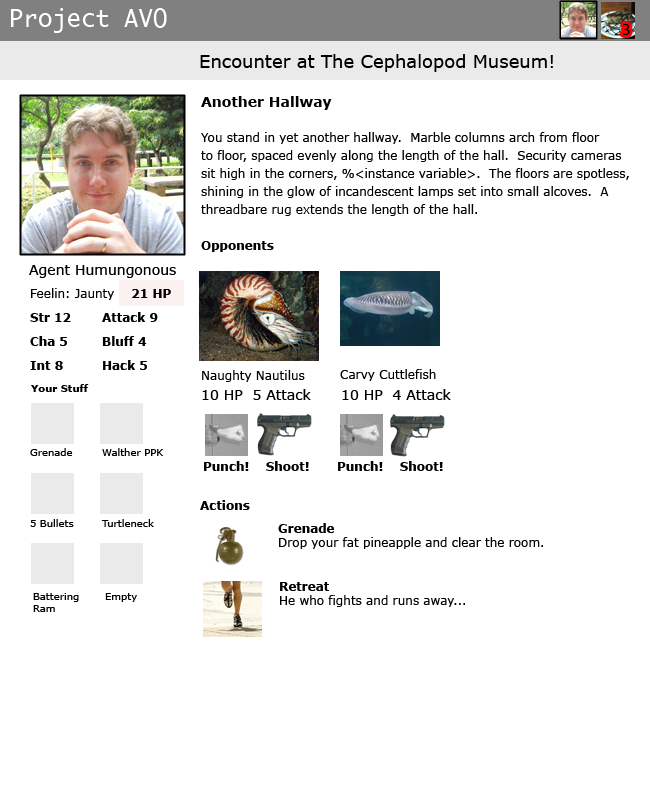
<style>
.page{position:relative;width:650px;height:800px;background:#ffffff}
.page>*{position:absolute;margin:0}
.t1{font:24px "Ayuthaya";color:#ffffff}
.t2{font:14px "Ayuthaya";color:#000000}
.t3{font:18px "Verdana";color:#000000}
.t4{font:12px/18px "Verdana";color:#000000}
.t5{font:14px "Verdana-Bold";color:#000000}
.t6{font:12px/18px "Verdana-Bold";color:#000000}
.t7{font:14px "Verdana";color:#000000}
.t8{font:12px "Verdana";color:#000000}
.t9{font:12px "Verdana-Bold";color:#000000}
.t10{font:12px/24px "Verdana-Bold";color:#000000}
.t11{font:10px "Verdana-Bold";color:#000000}
.t12{font:10px "Verdana";color:#000000}
.t13{font:10px/12px "Verdana";color:#000000}
</style>
<div class="page">
<p class="t1" style="left:11px;top:8px;width:156px;height:25px">Project AVO</p>
<p class="t2" style="left:622px;top:24px;width:8px;height:11px">3</p>
<p class="t3" style="left:200px;top:54px;width:353px;height:18px">Encounter at The Cephalopod Museum!</p>
<p class="t4" style="left:201px;top:96px;width:428px;height:156px"><span class="t5">Another Hallway<br><br></span>You stand in yet another hallway.  Marble columns arch from floor<br>to floor, spaced evenly along the length of the hall.  Security cameras<br>sit high in the corners, %&lt;instance variable&gt;.  The floors are spotless,<br>shining in the glow of incandescent lamps set into small alcoves.  A<br>threadbare rug extends the length of the hall.<br><br><span class="t6">Opponents</span></p>
<p class="t7" style="left:29px;top:265px;width:147px;height:13px">Agent Humungonous</p>
<p class="t8" style="left:31px;top:288px;width:140px;height:12px">Feelin: Jaunty    <span class="t9">21 HP</span></p>
<p class="t10" style="left:30px;top:313px;width:41px;height:57px">Str 12<br>Cha 5<br>Int 8</p>
<p class="t10" style="left:102px;top:312px;width:56px;height:58px">Attack 9<br>Bluff 4<br>Hack 5</p>
<p class="t8" style="left:202px;top:370px;width:103px;height:12px">Naughty Nautilus</p>
<p class="t8" style="left:340px;top:369px;width:96px;height:12px">Carvy Cuttlefish</p>
<p class="t11" style="left:31px;top:384px;width:58px;height:8px">Your Stuff</p>
<p class="t7" style="left:202px;top:389px;width:109px;height:11px">10 HP  5 Attack</p>
<p class="t7" style="left:342px;top:389px;width:109px;height:11px">10 HP  4 Attack</p>
<p class="t12" style="left:30px;top:448px;width:134px;height:8px">Grenade Walther PPK</p>
<p class="t9" style="left:204px;top:461px;width:105px;height:10px">Punch!    Shoot!</p>
<p class="t9" style="left:338px;top:461px;width:105px;height:10px">Punch!    Shoot!</p>
<p class="t9" style="left:200px;top:500px;width:50px;height:10px">Actions</p>
<p class="t12" style="left:30px;top:519px;width:124px;height:8px">5 Bullets Turtleneck</p>
<p class="t8" style="left:278px;top:523px;width:265px;height:26px"><span class="t9">Grenade<br></span>Drop your fat pineapple and clear the room.</p>
<p class="t8" style="left:280px;top:582px;width:185px;height:25px"><span class="t9">Retreat<br></span>He who fights and runs away...</p>
<p class="t13" style="left:33px;top:593px;width:104px;height:19px">Battering Empty<br>Ram</p>
</div>
